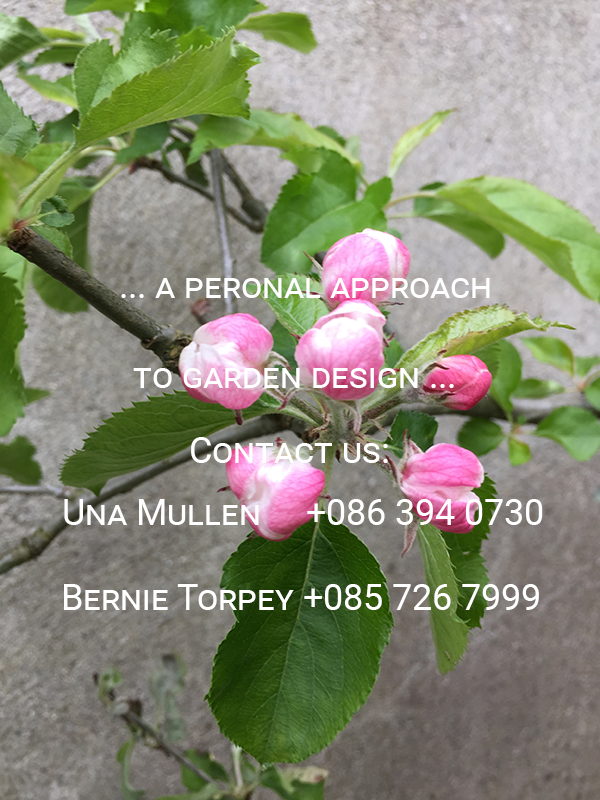
<style>
.page{position:relative;width:600px;height:800px}
.page>*{position:absolute;margin:0}
.t1{font:36px "Roboto-Regular";color:#ffffff;font-variant:small-caps}
</style>
<div class="page">
<p class="t1" style="left:121px;top:278px;width:369px;height:20px">... a peronal approach</p>
<p class="t1" style="left:133px;top:368px;width:321px;height:20px">to garden design ...</p>
<p class="t1" style="left:191px;top:437px;width:197px;height:26px">Contact us:</p>
<p class="t1" style="left:64px;top:499px;width:479px;height:26px">Una Mullen     +086 394 0730</p>
<p class="t1" style="left:64px;top:584px;width:475px;height:26px">Bernie Torpey +085 726 7999</p>
</div>
